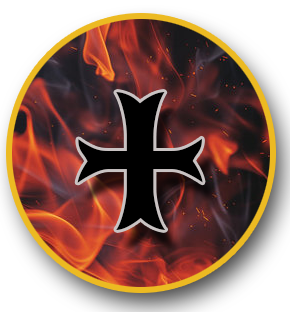
<style>
.page{position:relative;width:290px;height:312px}
.page>*{position:absolute;margin:0}
.t1{font:354px "Hellmuth";letter-spacing:0.025em;color:#000000}
</style>
<div class="page">
<p class="t1" style="left:77px;top:92px;width:126px;height:138px">+</p>
</div>
